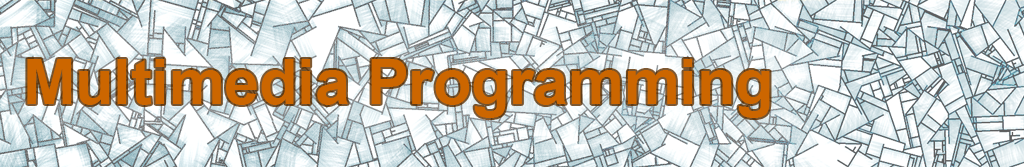
<style>
.page{position:relative;width:1024px;height:167px}
.page>*{position:absolute;margin:0}
.t1{font:62.5px "Arial-BoldMT";color:#cc6600}
</style>
<div class="page">
<p class="t1" style="left:27px;top:59px;width:743px;height:59px">Multimedia Programming</p>
</div>
